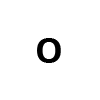
<style>
.page{position:relative;width:100px;height:100px;background:#ffffff}
.page>*{position:absolute;margin:0}
.t1{font:35px "OpenSans-Bold";color:#000000}
</style>
<div class="page">
<p class="t1" style="left:37px;top:38px;width:24px;height:25px">O</p>
</div>
